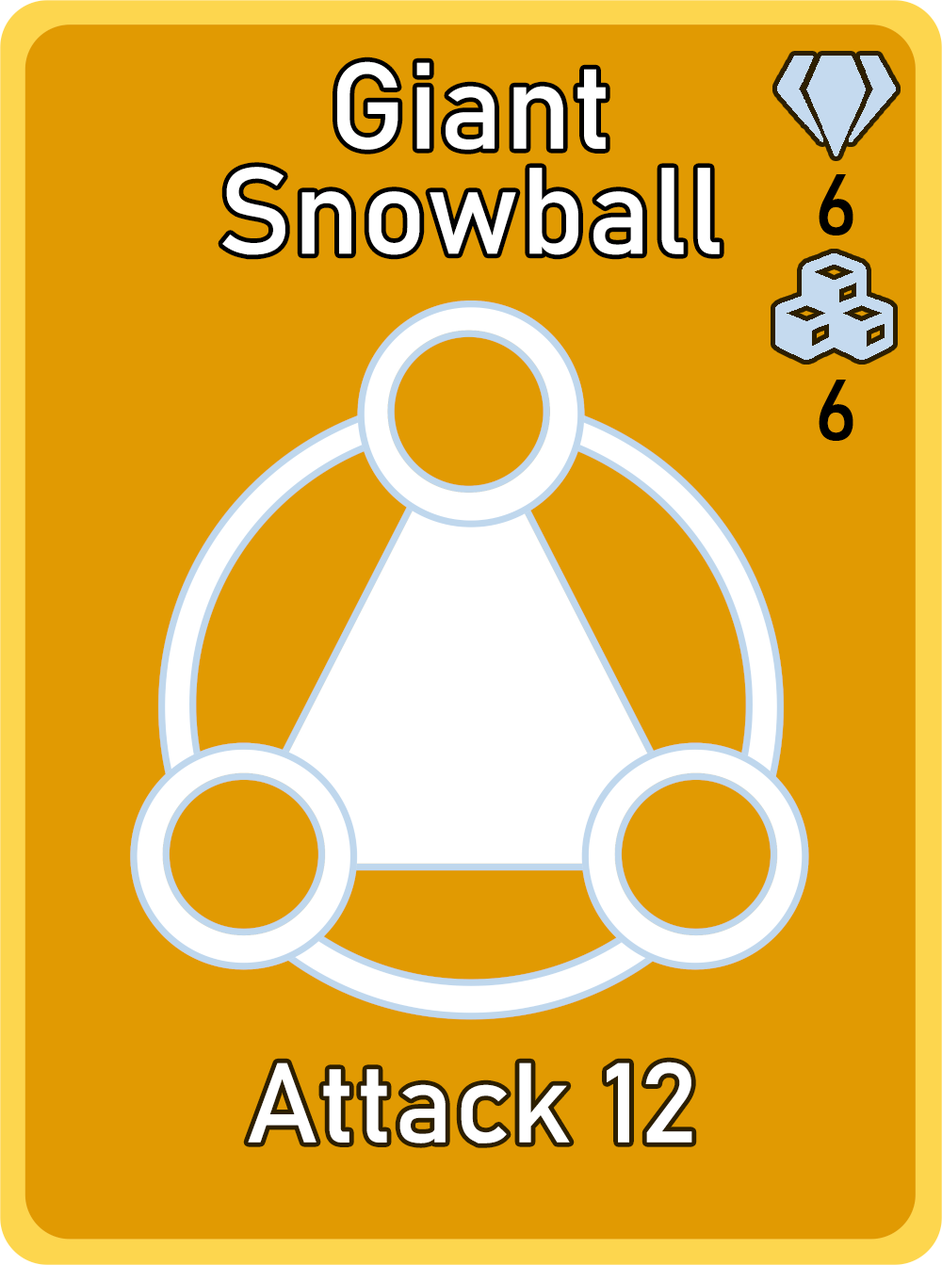
<style>
.page{position:relative;width:942px;height:1265px;background:#e19a02}
.page>*{position:absolute;margin:0}
.t1{font:120.6px/105.1px "Bahnschrift";letter-spacing:0.01em;color:#ffffff}
.t2{font:85px "Bahnschrift";letter-spacing:0.01em;color:#000000}
.t3{font:111.3px "Bahnschrift";letter-spacing:0.01em;color:#ffffff}
</style>
<div class="page">
<p class="t1" style="left:222px;top:61px;width:498px;height:194px;text-align:center">Giant<br>Snowball</p>
<p class="t2" style="left:819px;top:174px;width:35px;height:62px">6</p>
<p class="t2" style="left:819px;top:380px;width:35px;height:61px">6</p>
<p class="t3" style="left:248px;top:1062px;width:445px;height:82px">Attack 12</p>
</div>
